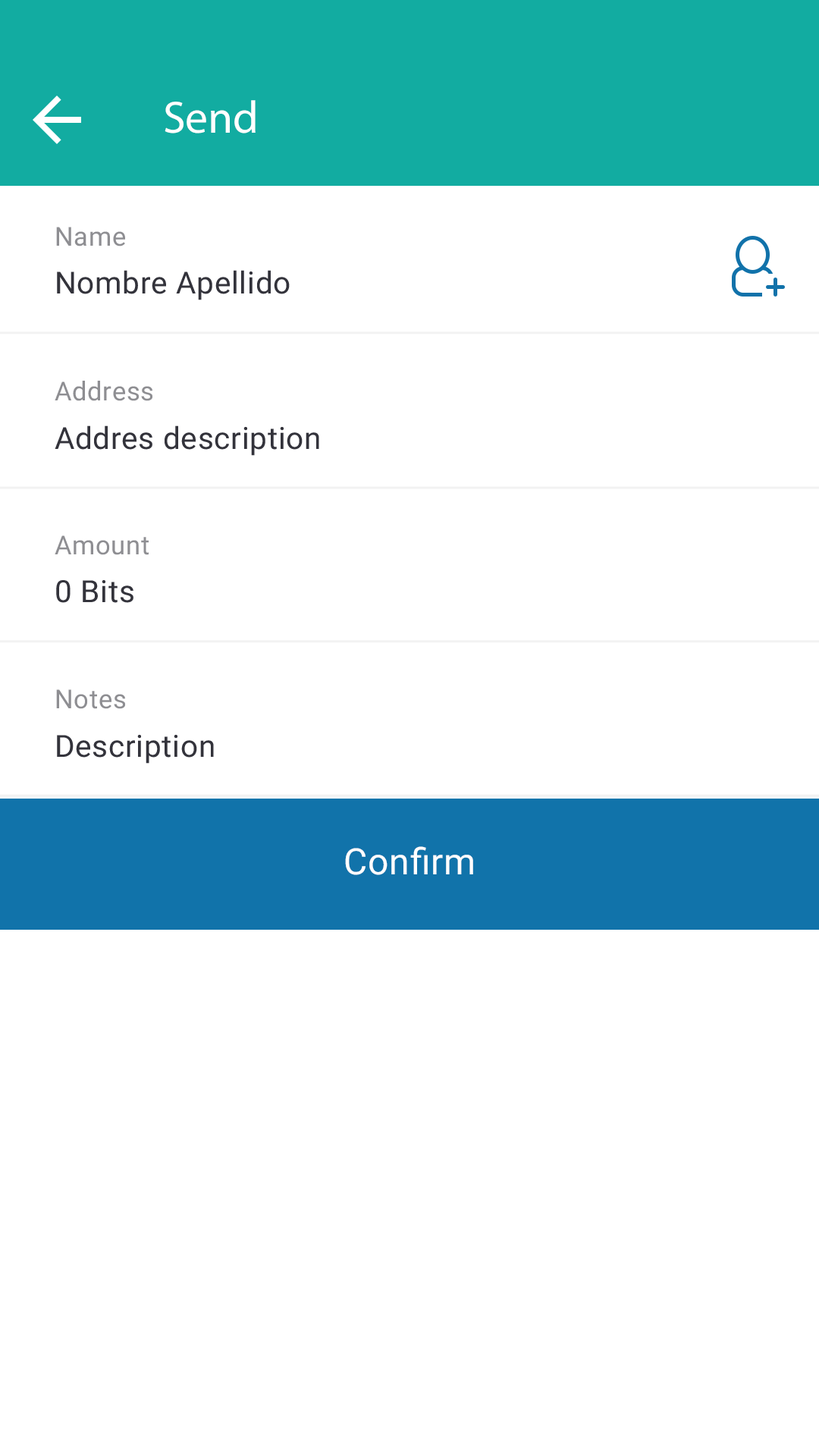
<style>
.page{position:relative;width:819px;height:1456px;background:#ffffff}
.page>*{position:absolute;margin:0}
.t1{font:45.5px "MyriadPro-Regular";letter-spacing:0.005em;color:#ffffff}
.t2{font:26.2px "Roboto-Regular";letter-spacing:0.02em;color:#8e8e92}
.t3{font:30.6px "Roboto-Regular";letter-spacing:0.02em;color:#1d1d26}
.t4{font:36.4px "Roboto-Regular";letter-spacing:0.02em;color:#ffffff}
</style>
<div class="page">
<p class="t1" style="left:165px;top:100px;width:91px;height:33px">Send</p>
<p class="t2" style="left:56px;top:227px;width:69px;height:19px">Name</p>
<p class="t3" style="left:57px;top:270px;width:233px;height:30px;opacity:0.9">Nombre Apellido</p>
<p class="t2" style="left:55px;top:381px;width:97px;height:20px">Address</p>
<p class="t3" style="left:55px;top:425px;width:264px;height:31px;opacity:0.9">Addres description</p>
<p class="t2" style="left:55px;top:535px;width:94px;height:20px">Amount</p>
<p class="t3" style="left:56px;top:580px;width:77px;height:23px;opacity:0.9">0 Bits</p>
<p class="t2" style="left:56px;top:689px;width:69px;height:20px">Notes</p>
<p class="t3" style="left:57px;top:735px;width:157px;height:29px;opacity:0.9">Description</p>
<p class="t4" style="left:345px;top:846px;width:128px;height:29px">Confirm</p>
</div>
